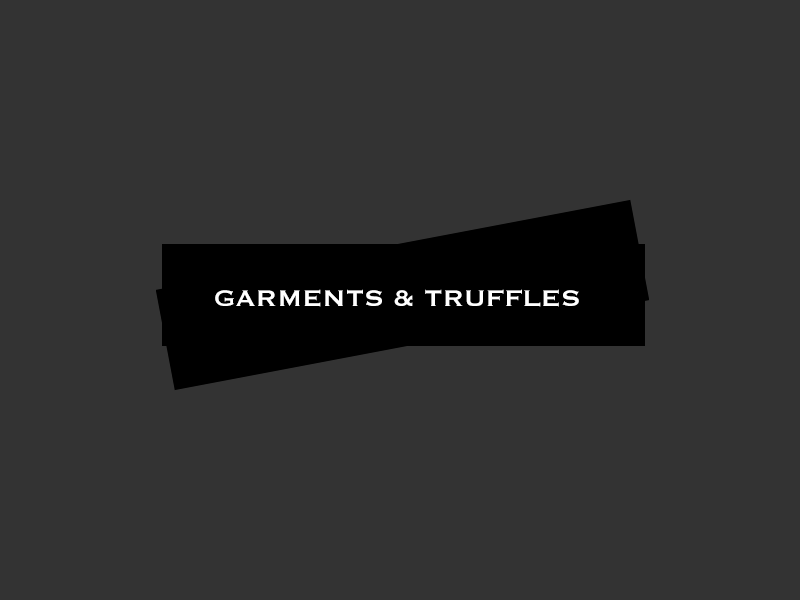
<style>
.page{position:relative;width:800px;height:600px;background:#333333}
.page>*{position:absolute;margin:0}
.t1{font:29.6px "Copperplate";color:#ffffff}
</style>
<div class="page">
<p class="t1" style="left:215px;top:289px;width:364px;height:18px">GARMENTS &amp; TRUFFLES</p>
</div>
